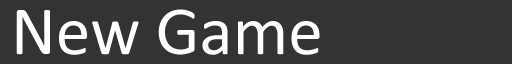
<style>
.page{position:relative;width:512px;height:64px;background:#333333}
.page>*{position:absolute;margin:0}
.t1{font:69.4px "Calibri";color:#ffffff}
</style>
<div class="page">
<p class="t1" style="left:16px;top:9px;width:304px;height:46px">New Game</p>
</div>
